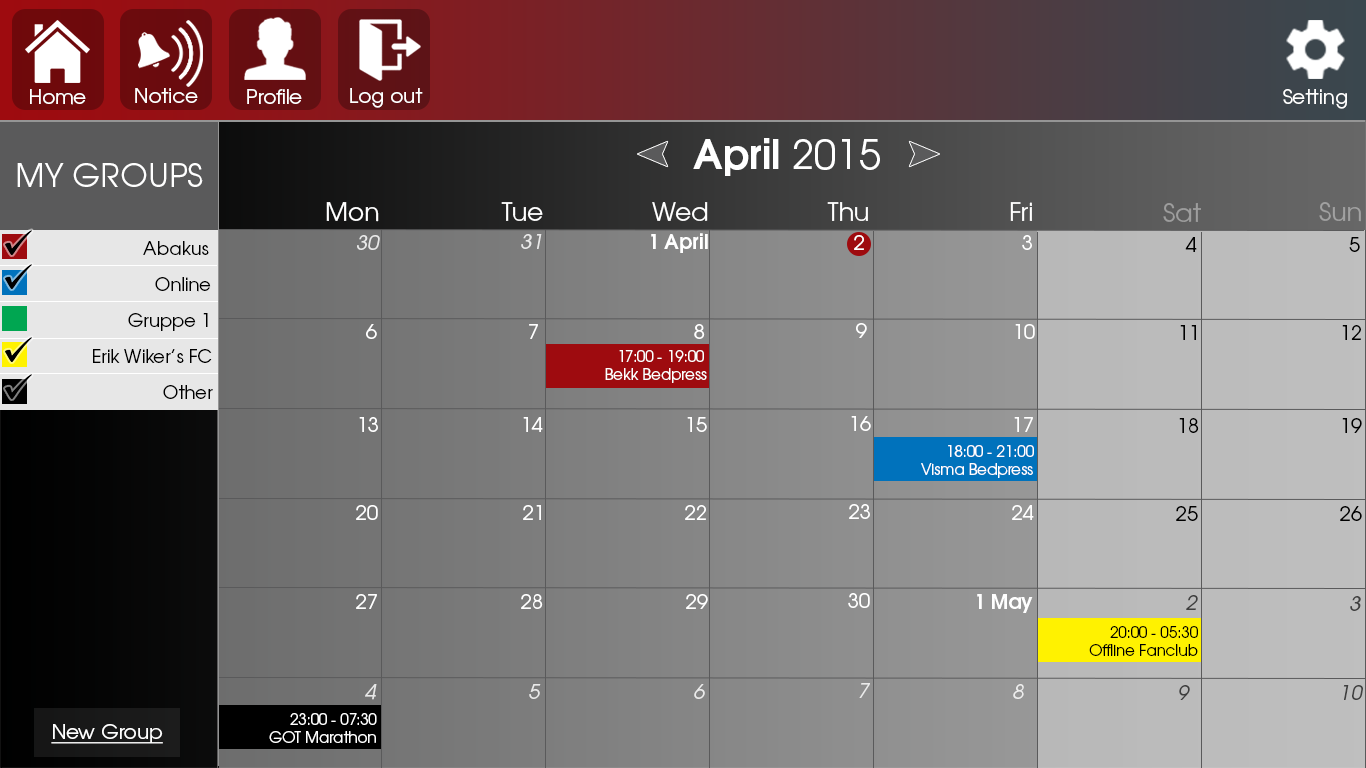
<style>
.page{position:relative;width:1366px;height:768px}
.page>*{position:absolute;margin:0}
.t1{font:20px "TeXGyreAdventor-Regular";color:#ffffff}
.t2{font:40px "TeXGyreAdventor-Bold";color:#ffffff}
.t3{font:40px "TeXGyreAdventor-Regular";color:#ffffff}
.t4{font:32px "TeXGyreAdventor-Regular";color:#ffffff}
.t5{font:25px "TeXGyreAdventor-Regular";color:#ffffff}
.t6{font:25px "TeXGyreAdventor-Regular";color:#9d9d9d}
.t7{font:25px "TeXGyreAdventor-Regular";color:#a1a1a1}
.t8{font:20px "TeXGyreAdventor-Bold";color:#ffffff}
.t9{font:18px "TeXGyreAdventor-Regular";color:#000000}
.t10{font:20px "TeXGyreAdventor-Italic";color:#ffffff}
.t11{font:20px "TeXGyreAdventor-Regular";color:#000000}
.t12{font:15px "TeXGyreAdventor-Regular";color:#ffffff}
.t13{font:20px "TeXGyreAdventor-Italic";color:#3e3e3e}
.t14{font:20px "TeXGyreAdventor-Italic";color:#404040}
.t15{font:15px "TeXGyreAdventor-Regular";color:#000000}
.t16{font:20px "TeXGyreAdventor-Italic";color:#3f3f3f}
.t17{font:20px "TeXGyreAdventor-Regular";color:#ffffff;text-decoration:underline}
</style>
<div class="page">
<p class="t1" style="left:30px;top:89px;width:56px;height:16px">Home</p>
<p class="t1" style="left:135px;top:88px;width:63px;height:15px">Notice</p>
<p class="t1" style="left:247px;top:89px;width:55px;height:15px">Profile</p>
<p class="t1" style="left:350px;top:88px;width:73px;height:20px">Log out</p>
<p class="t1" style="left:1283px;top:89px;width:64px;height:20px">Setting</p>
<p class="t2" style="left:693px;top:138px;width:187px;height:38px">April <span class="t3">2015</span></p>
<p class="t4" style="left:17px;top:163px;width:186px;height:24px">MY GROUPS</p>
<p class="t5" style="left:326px;top:202px;width:53px;height:20px">Mon</p>
<p class="t5" style="left:501px;top:202px;width:42px;height:19px">Tue</p>
<p class="t5" style="left:652px;top:202px;width:56px;height:19px">Wed</p>
<p class="t5" style="left:827px;top:202px;width:41px;height:19px">Thu</p>
<p class="t5" style="left:1010px;top:202px;width:22px;height:19px">Fri</p>
<p class="t6" style="left:1163px;top:203px;width:38px;height:19px">Sat</p>
<p class="t7" style="left:1319px;top:202px;width:42px;height:20px">Sun</p>
<p class="t8" style="left:651px;top:233px;width:57px;height:20px">1 April</p>
<p class="t9" style="left:143px;top:241px;width:66px;height:14px">Abakus</p>
<p class="t10" style="left:357px;top:235px;width:23px;height:15px;opacity:0.8">30</p>
<p class="t10" style="left:521px;top:234px;width:21px;height:15px;opacity:0.8">31</p>
<p class="t1" style="left:854px;top:235px;width:10px;height:15px">2</p>
<p class="t1" style="left:1022px;top:235px;width:10px;height:15px">3</p>
<p class="t11" style="left:1185px;top:237px;width:12px;height:15px">4</p>
<p class="t11" style="left:1349px;top:237px;width:11px;height:15px">5</p>
<p class="t9" style="left:155px;top:277px;width:56px;height:15px">Online</p>
<p class="t9" style="left:128px;top:313px;width:80px;height:18px">Gruppe 1</p>
<p class="t1" style="left:366px;top:324px;width:11px;height:15px">6</p>
<p class="t1" style="left:529px;top:324px;width:9px;height:15px">7</p>
<p class="t1" style="left:694px;top:324px;width:11px;height:15px">8</p>
<p class="t1" style="left:856px;top:323px;width:11px;height:15px">9</p>
<p class="t1" style="left:1015px;top:324px;width:20px;height:15px">10</p>
<p class="t11" style="left:1180px;top:325px;width:16px;height:15px">11</p>
<p class="t11" style="left:1342px;top:325px;width:19px;height:15px">12</p>
<p class="t9" style="left:93px;top:349px;width:119px;height:14px">Erik Wiker’s FC</p>
<p class="t12" style="left:605px;top:350px;width:102px;height:33px">17:00 - 19:00<br>Bekk Bedpress</p>
<p class="t9" style="left:163px;top:385px;width:50px;height:14px">Other</p>
<p class="t1" style="left:359px;top:417px;width:19px;height:15px">13</p>
<p class="t1" style="left:523px;top:417px;width:20px;height:15px">14</p>
<p class="t1" style="left:687px;top:417px;width:20px;height:15px">15</p>
<p class="t1" style="left:851px;top:416px;width:20px;height:15px">16</p>
<p class="t1" style="left:1014px;top:417px;width:19px;height:15px">17</p>
<p class="t11" style="left:1179px;top:418px;width:20px;height:15px">18</p>
<p class="t11" style="left:1342px;top:418px;width:20px;height:15px">19</p>
<p class="t12" style="left:921px;top:445px;width:113px;height:33px">18:00 - 21:00<br>Visma Bedpress</p>
<p class="t1" style="left:356px;top:505px;width:22px;height:15px">20</p>
<p class="t1" style="left:523px;top:505px;width:18px;height:15px">21</p>
<p class="t1" style="left:685px;top:505px;width:21px;height:15px">22</p>
<p class="t1" style="left:849px;top:504px;width:21px;height:15px">23</p>
<p class="t1" style="left:1012px;top:505px;width:22px;height:15px">24</p>
<p class="t11" style="left:1176px;top:506px;width:22px;height:15px">25</p>
<p class="t11" style="left:1340px;top:506px;width:22px;height:15px">26</p>
<p class="t1" style="left:848px;top:593px;width:22px;height:15px">30</p>
<p class="t1" style="left:356px;top:594px;width:21px;height:15px">27</p>
<p class="t1" style="left:521px;top:594px;width:22px;height:15px">28</p>
<p class="t1" style="left:686px;top:594px;width:22px;height:15px">29</p>
<p class="t8" style="left:977px;top:594px;width:56px;height:19px">1 May</p>
<p class="t13" style="left:1186px;top:595px;width:12px;height:15px">2</p>
<p class="t14" style="left:1350px;top:596px;width:11px;height:15px">3</p>
<p class="t15" style="left:1089px;top:626px;width:109px;height:30px">20:00 - 05:30<br> Offline Fanclub</p>
<p class="t10" style="left:365px;top:684px;width:12px;height:16px;opacity:0.8">4</p>
<p class="t10" style="left:529px;top:684px;width:12px;height:15px;opacity:0.8">5</p>
<p class="t10" style="left:694px;top:684px;width:11px;height:15px;opacity:0.8">6</p>
<p class="t10" style="left:859px;top:683px;width:11px;height:15px;opacity:0.8">7</p>
<p class="t10" style="left:1013px;top:684px;width:11px;height:15px;opacity:0.8">8</p>
<p class="t13" style="left:1179px;top:685px;width:11px;height:15px">9</p>
<p class="t16" style="left:1343px;top:685px;width:20px;height:15px">10</p>
<p class="t12" style="left:269px;top:713px;width:108px;height:30px">23:00 - 07:30<br> GOT Marathon</p>
<p class="t17" style="left:51px;top:724px;width:112px;height:20px">New Group</p>
</div>
